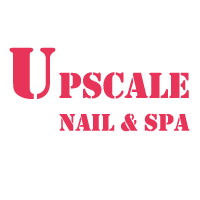
<style>
.page{position:relative;width:200px;height:200px;background:#ffffff}
.page>*{position:absolute;margin:0}
.t1{font:37.5px "Stencil";color:#e83458;text-transform:uppercase}
.t2{font:75px "Stencil";color:#e83458;text-transform:uppercase}
.t3{font:25px "Stencil";color:#e83458;text-transform:uppercase}
</style>
<div class="page">
<p class="t1" style="left:9px;top:47px;width:180px;height:52px"><span class="t2">U</span>PSCale</p>
<p class="t3" style="left:59px;top:113px;width:131px;height:19px">Nail &amp; SPA</p>
</div>
